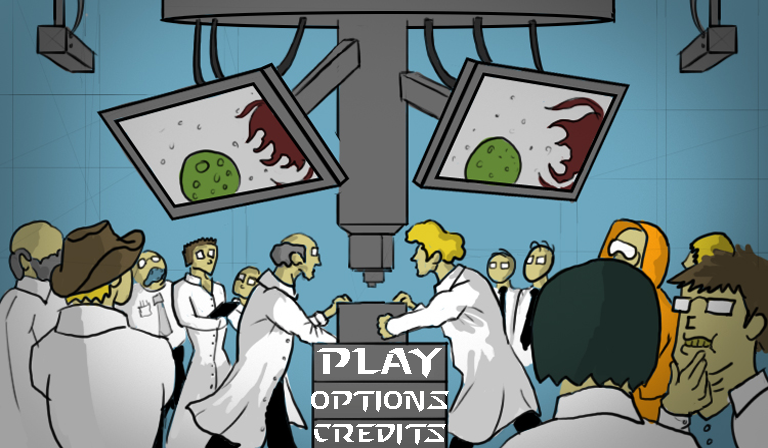
<style>
.page{position:relative;width:768px;height:448px}
.page>*{position:absolute;margin:0}
.t1{font:37.5px "StarcraftNormal";color:#ffffff}
.t2{font:25px "StarcraftNormal";color:#ffffff}
</style>
<div class="page">
<p class="t1" style="left:317px;top:348px;width:125px;height:30px">PLAY</p>
<p class="t2" style="left:311px;top:391px;width:138px;height:21px">Options</p>
<p class="t2" style="left:314px;top:424px;width:132px;height:21px">Credits</p>
</div>
